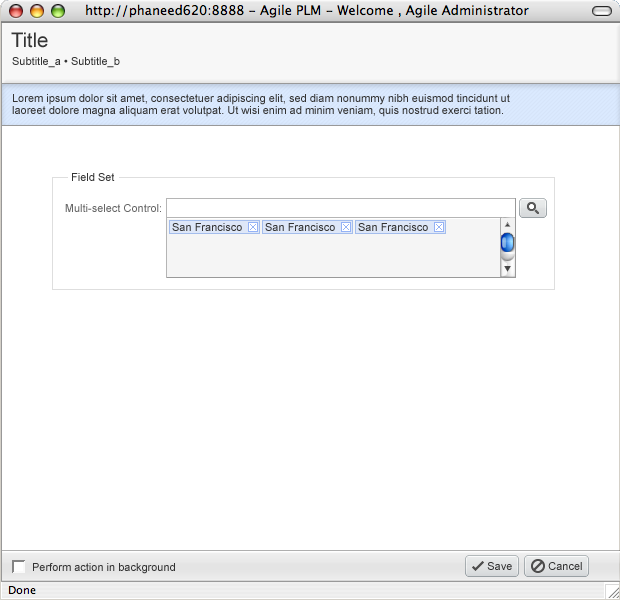
<style>
.page{position:relative;width:620px;height:600px;background:#ffffff}
.page>*{position:absolute;margin:0}
.t1{font:20px "ArialMT";color:#333333}
.t2{font:11px "ArialMT";color:#333333}
.t3{font:11px/12px "ArialMT";color:#333333}
.t4{font:11px "ArialMT";color:#666666}
</style>
<div class="page">
<p class="t1" style="left:11px;top:32px;width:37px;height:16px">Title</p>
<p class="t2" style="left:12px;top:57px;width:108px;height:11px">Subtitle_a • Subtitle_b</p>
<p class="t3" style="left:12px;top:94px;width:498px;height:23px">Lorem ipsum dolor sit amet, consectetuer adipiscing elit, sed diam nonummy nibh euismod tincidunt ut <br>laoreet dolore magna aliquam erat volutpat. Ut wisi enim ad minim veniam, quis nostrud exerci tation.</p>
<p class="t2" style="left:72px;top:173px;width:43px;height:8px">Field Set</p>
<p class="t4" style="left:65px;top:204px;width:96px;height:8px">Multi-select Control:</p>
<p class="t2" style="left:172px;top:223px;width:70px;height:8px">San Francisco</p>
<p class="t2" style="left:265px;top:223px;width:70px;height:8px">San Francisco</p>
<p class="t2" style="left:358px;top:223px;width:70px;height:8px">San Francisco</p>
<p class="t2" style="left:33px;top:563px;width:142px;height:11px">Perform action in background</p>
<p class="t2" style="left:487px;top:562px;width:25px;height:8px">Save</p>
<p class="t2" style="left:548px;top:562px;width:34px;height:8px">Cancel</p>
</div>
